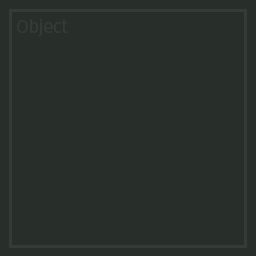
<style>
.page{position:relative;width:256px;height:256px;background:#282f2a}
.page>*{position:absolute;margin:0}
.t1{font:18px "FiraSans-Regular";letter-spacing:-0.02em;color:#363c35}
</style>
<div class="page">
<p class="t1" style="left:17px;top:19px;width:51px;height:18px">Object</p>
</div>
